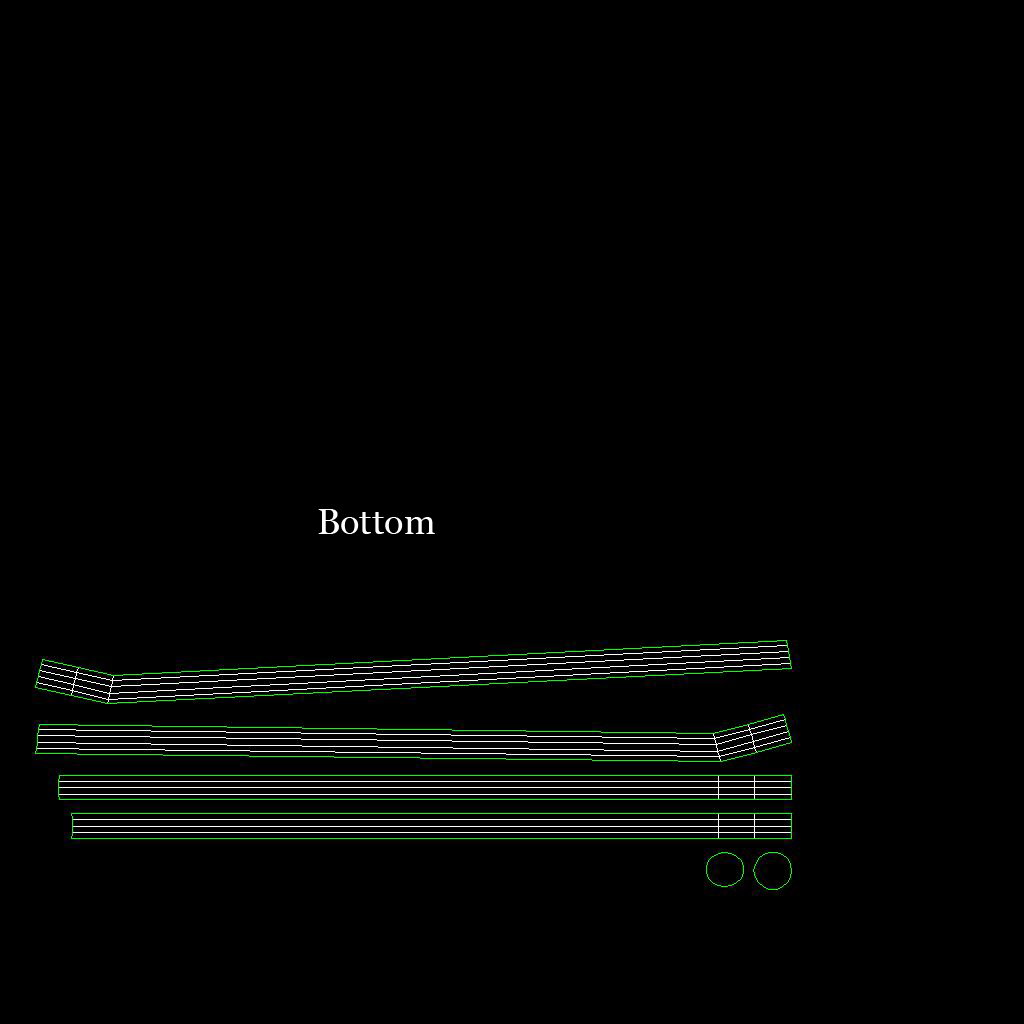
<style>
.page{position:relative;width:1024px;height:1024px;background:#000000}
.page>*{position:absolute;margin:0}
.t1{font:36px "Georgia";color:#ffffff}
</style>
<div class="page">
<p class="t1" style="left:318px;top:509px;width:117px;height:25px">Bottom</p>
</div>
